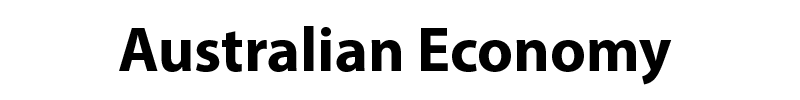
<style>
.page{position:relative;width:800px;height:100px;background:#ffffff}
.page>*{position:absolute;margin:0}
.t1{font:62.5px "MyriadPro-Bold";color:#000000}
</style>
<div class="page">
<p class="t1" style="left:119px;top:26px;width:553px;height:59px">Australian Economy</p>
</div>
